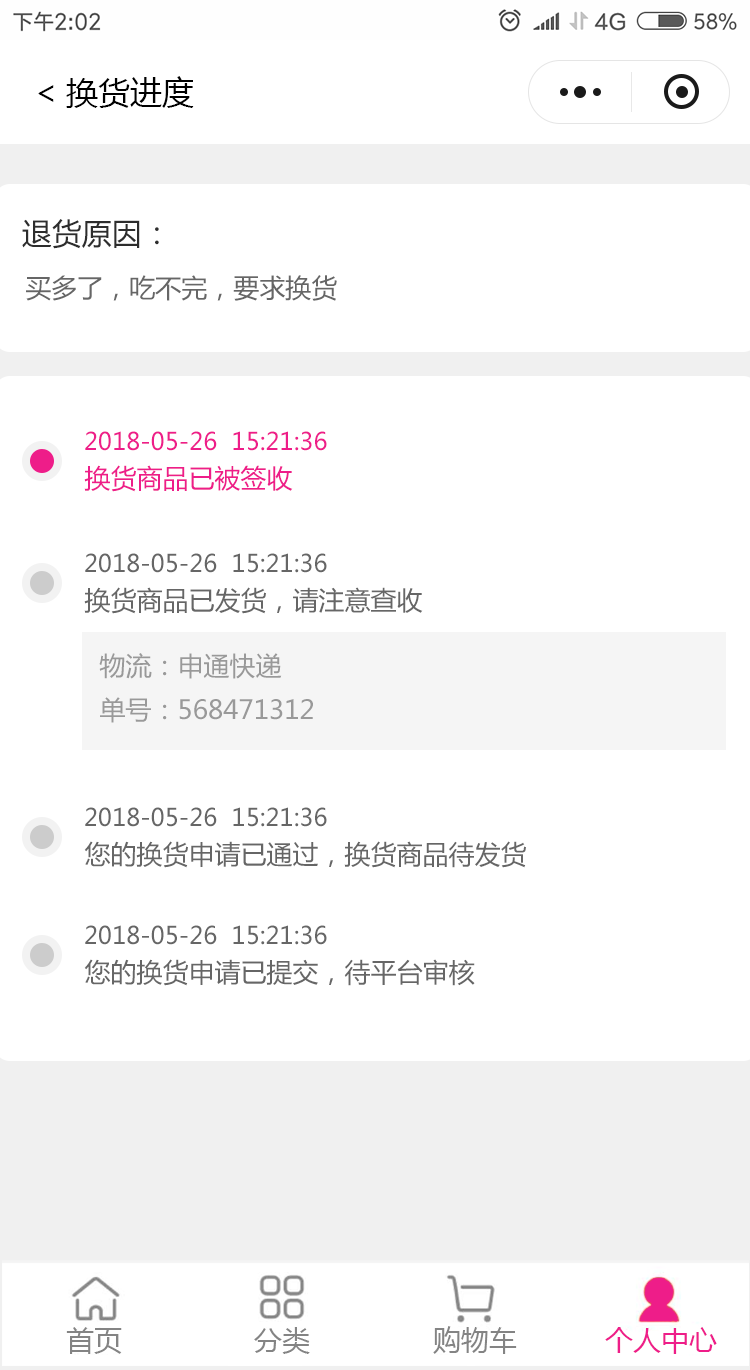
<style>
.page{position:relative;width:750px;height:1370px;background:#ffffff}
.page>*{position:absolute;margin:0}
.t1{font:32px "MicrosoftYaHei";color:#000000}
.t2{font:30px "MicrosoftYaHei";color:#2d2d2d}
.t3{font:26px "MicrosoftYaHei";color:#666666}
.t4{font:24px "MicrosoftYaHei";color:#ee1d89}
.t5{font:26px "MicrosoftYaHei";color:#ee1d89}
.t6{font:24px "MicrosoftYaHei";color:#666666}
.t7{font:26px/44px "MicrosoftYaHei";color:#999999}
</style>
<div class="page">
<p class="t1" style="left:38px;top:76px;width:156px;height:32px">&lt;换货进度</p>
<p class="t2" style="left:22px;top:219px;width:137px;height:30px">退货原因：</p>
<p class="t3" style="left:26px;top:275px;width:311px;height:26px">买多了，吃不完，要求换货</p>
<p class="t4" style="left:85px;top:431px;width:242px;height:20px">2018-05-26  15:21:36</p>
<p class="t5" style="left:84px;top:465px;width:209px;height:27px">换货商品已被签收</p>
<p class="t6" style="left:85px;top:553px;width:242px;height:20px">2018-05-26  15:21:36</p>
<p class="t3" style="left:84px;top:587px;width:339px;height:27px">换货商品已发货，请注意查收</p>
<p class="t7" style="left:99px;top:653px;width:214px;height:70px">物流：申通快递<br>单号：568471312</p>
<p class="t6" style="left:85px;top:807px;width:242px;height:20px">2018-05-26  15:21:36</p>
<p class="t3" style="left:84px;top:841px;width:442px;height:27px">您的换货申请已通过，换货商品待发货</p>
<p class="t6" style="left:85px;top:925px;width:242px;height:20px">2018-05-26  15:21:36</p>
<p class="t3" style="left:84px;top:959px;width:391px;height:27px">您的换货申请已提交，待平台审核</p>
</div>
